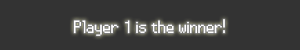
<style>
.page{position:relative;width:300px;height:50px;background:#333333}
.page>*{position:absolute;margin:0}
.t1{font:18px "Power-Clear";color:#ffffff}
</style>
<div class="page">
<p class="t1" style="left:73px;top:19px;width:152px;height:17px">Player 1 is the winner!</p>
</div>
